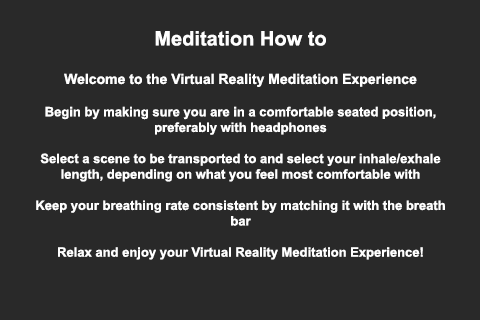
<style>
.page{position:relative;width:480px;height:320px;background:#292929}
.page>*{position:absolute;margin:0}
.t1{font:13px "Arial-BoldMT";color:#ffffff}
.t2{font:18px "Arial-BoldMT";color:#ffffff}
.t3{font:20px "Arial-BoldMT";color:#ffffff}
.t4{font:14px "Arial-BoldMT";color:#ffffff}
</style>
<div class="page">
<p class="t1" style="left:36px;top:31px;width:409px;height:229px;text-align:center"><span class="t2"><br><br></span><span class="t3">Meditation How to<br><br></span><span class="t4">Welcome to the Virtual Reality Meditation Experience<br><br></span>Begin by making sure you are in a comfortable seated position, preferably with headphones<br><br>Select a scene to be transported to and select your inhale/exhale length, depending on what you feel most comfortable with<br><br>Keep your breathing rate consistent by matching it with the breath bar<br><br>Relax and enjoy your Virtual Reality Meditation Experience!</p>
</div>
